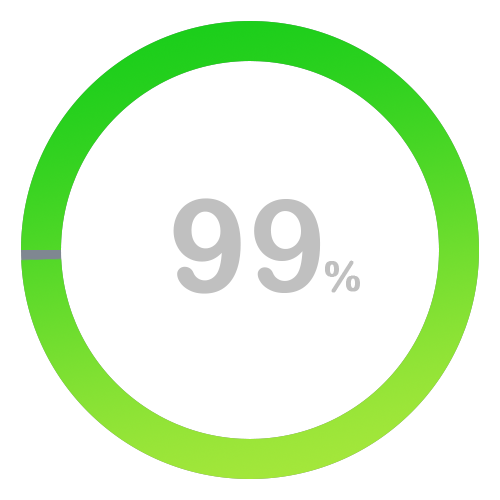
<style>
.page{position:relative;width:500px;height:500px;background:#ffffff}
.page>*{position:absolute;margin:0}
.t1{font:129.2px "ArialRoundedMTBold";color:#c0c0c0;font-weight:bold}
.t2{font:41.7px "ArialRoundedMTBold";color:#c0c0c0;font-weight:bold}
</style>
<div class="page">
<p class="t1" style="left:173px;top:198px;width:148px;height:96px">99</p>
<p class="t2" style="left:325px;top:260px;width:35px;height:33px">%</p>
</div>
